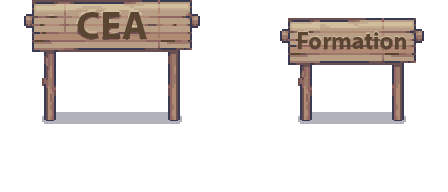
<style>
.page{position:relative;width:448px;height:192px;background:#ffffff}
.page>*{position:absolute;margin:0}
.t1{font:40px "MyriadPro-Bold";color:#5a4432}
.t2{font:24px "MyriadPro-Bold";color:#5a4432}
</style>
<div class="page">
<p class="t1" style="left:77px;top:12px;width:70px;height:27px">CEA</p>
<p class="t2" style="left:298px;top:32px;width:108px;height:17px">Formation</p>
</div>
